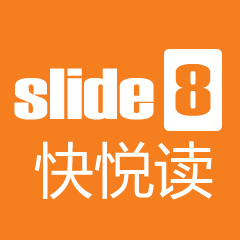
<style>
.page{position:relative;width:240px;height:240px;background:#f57e1e}
.page>*{position:absolute;margin:0}
.t1{font:72px "Haettenschweiler";color:#f57e1e;scale:1.4 1}
.t2{font:72px "Haettenschweiler";color:#fefefe;scale:1.4 1}
.t3{font:60px "MicrosoftYaHei";color:#ffffff}
</style>
<div class="page">
<p class="t1" style="left:175px;top:64px;width:36px;height:52px">8</p>
<p class="t2" style="left:14px;top:68px;width:140px;height:52px">slide</p>
<p class="t3" style="left:34px;top:141px;width:179px;height:59px">快悦读</p>
</div>
